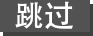
<style>
.page{position:relative;width:93px;height:36px;background:#525252}
.page>*{position:absolute;margin:0}
.t1{font:30px "AdobeHeitiStd-Regular";color:#ffffff}
</style>
<div class="page">
<p class="t1" style="left:15px;top:1px;width:58px;height:28px">跳过</p>
</div>
